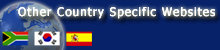
<style>
.page{position:relative;width:220px;height:50px;background:#072268}
.page>*{position:absolute;margin:0}
.t1{font:11.7px "Tahoma";letter-spacing:0.09em;color:#ffffff}
</style>
<div class="page">
<p class="t1" style="left:18px;top:7px;width:197px;height:12px">Other Country Specific Websites</p>
<p class="t1" style="left:18px;top:7px;width:197px;height:12px">Other Country Specific Websites</p>
<p class="t1" style="left:18px;top:7px;width:197px;height:12px">Other Country Specific Websites</p>
</div>
